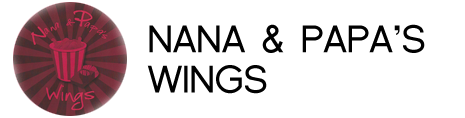
<style>
.page{position:relative;width:465px;height:118px;background:#ffffff}
.page>*{position:absolute;margin:0}
.t1{font:38.4px/40.2px "FlorencesansSC";letter-spacing:-0.03em;color:#010101;text-transform:uppercase}
</style>
<div class="page">
<p class="t1" style="left:147px;top:24px;width:278px;height:70px">NanA &amp; papa’s<br>WINGS</p>
</div>
